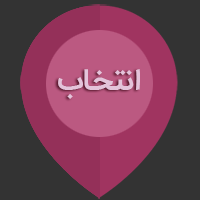
<style>
.page{position:relative;width:200px;height:200px;background:#333333}
.page>*{position:absolute;margin:0}
.t1{font:36px "IRANSans-Bold";color:#e4c3da}
</style>
<div class="page">
<p class="t1" style="left:58px;top:69px;width:82px;height:30px">انتخاب</p>
</div>
